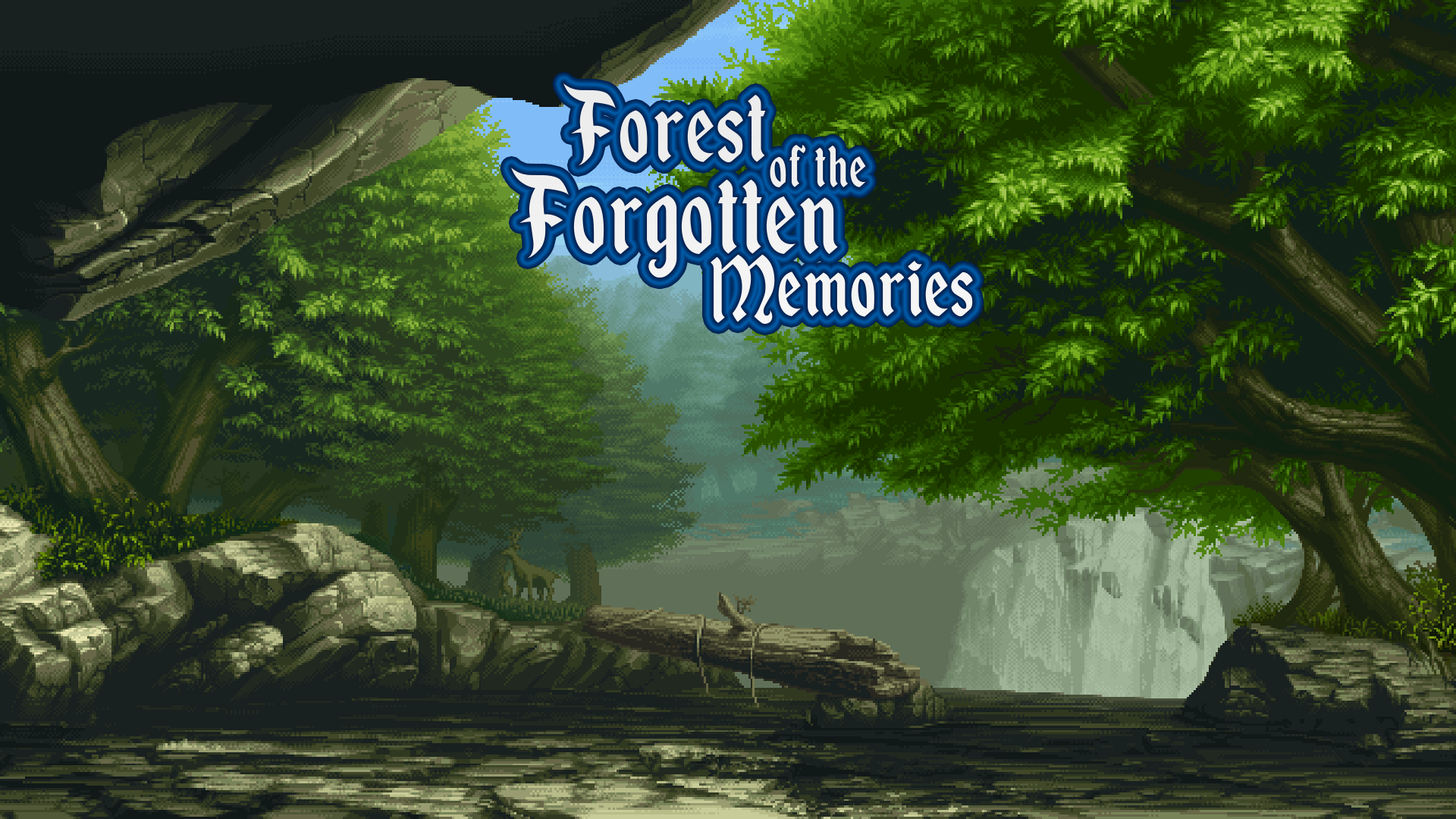
<style>
.page{position:relative;width:1456px;height:819px}
.page>*{position:absolute;margin:0}
.t1{font:121.5px "EnchantedLand";letter-spacing:0.025em;color:#ededed;scale:0.87 1}
.t2{font:70.4px "EnchantedLand";letter-spacing:0.025em;color:#efefef;scale:0.87 1}
.t3{font:133.8px "EnchantedLand";letter-spacing:0.025em;color:#f1f1f1;scale:0.87 1}
.t4{font:102.6px "EnchantedLand";letter-spacing:0.025em;color:#f5f5f5;scale:0.87 1}
</style>
<div class="page">
<p class="t1" style="left:563px;top:83px;width:203px;height:83px">Forest</p>
<p class="t2" style="left:770px;top:145px;width:96px;height:42px">of the</p>
<p class="t3" style="left:511px;top:167px;width:327px;height:111px">Forgotten</p>
<p class="t4" style="left:711px;top:254px;width:262px;height:70px">Memories</p>
</div>
